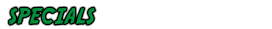
<style>
.page{position:relative;width:272px;height:29px;background:#ffffff}
.page>*{position:absolute;margin:0}
.t1{font:21.2px "Adventure";color:#00913d;text-transform:uppercase;scale:0.89 1}
</style>
<div class="page">
<p class="t1" style="left:9px;top:7px;width:86px;height:18px">Specials</p>
</div>
